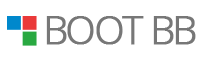
<style>
.page{position:relative;width:200px;height:60px;background:#ffffff}
.page>*{position:absolute;margin:0}
.t1{font:38.6px "OpenSans-Light";letter-spacing:-0.06em;color:#777777;text-transform:uppercase;font-weight:bold}
</style>
<div class="page">
<p class="t1" style="left:46px;top:16px;width:150px;height:29px">Boot Bb</p>
</div>
